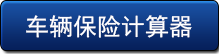
<style>
.page{position:relative;width:219px;height:54px}
.page>*{position:absolute;margin:0}
.t1{font:24px "SimHei";color:#ffffff}
</style>
<div class="page">
<p class="t1" style="left:26px;top:15px;width:166px;height:23px">车辆保险计算器</p>
</div>
